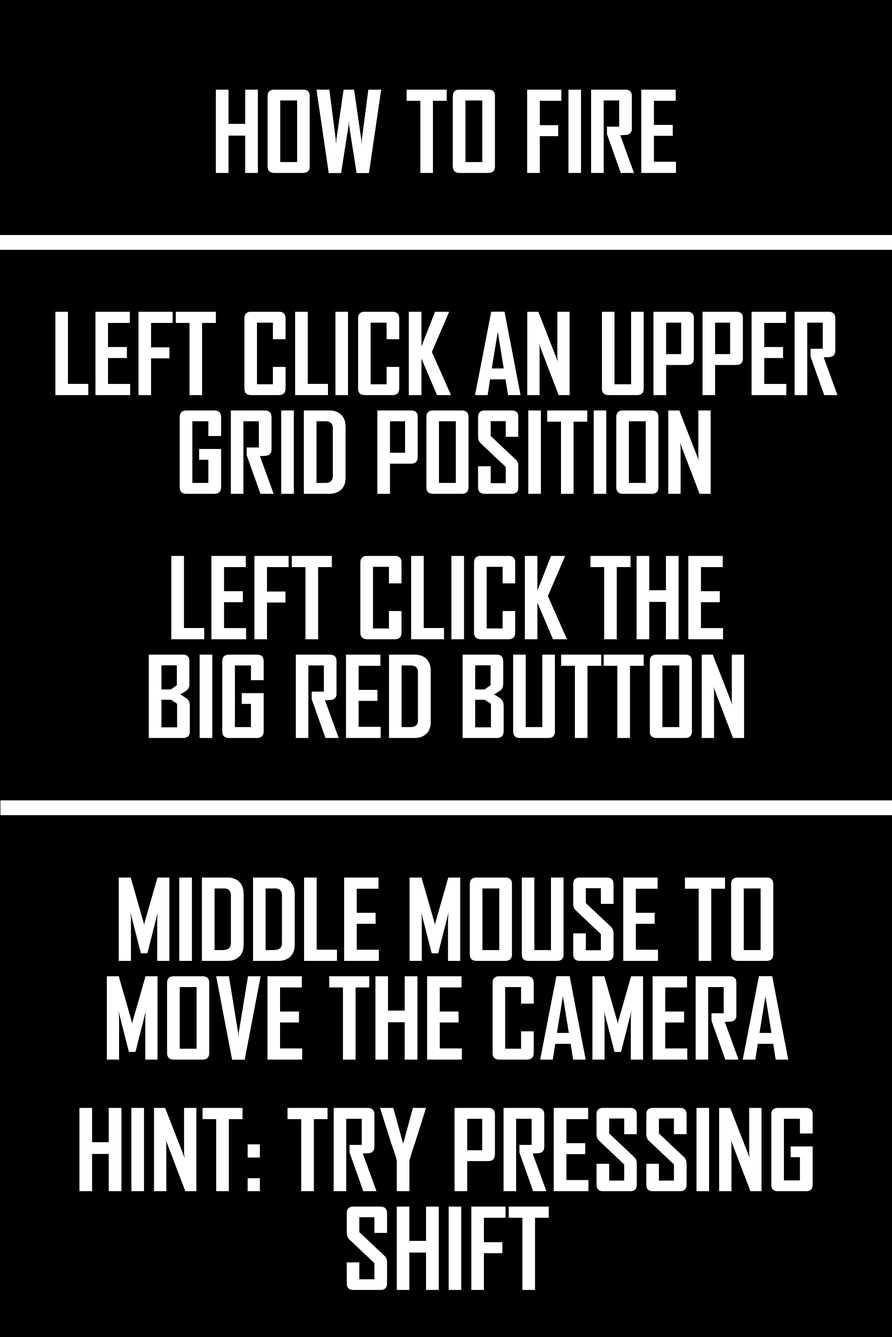
<style>
.page{position:relative;width:892px;height:1337px;background:#000000}
.page>*{position:absolute;margin:0}
.t1{font:108.8px "AgencyFB-Bold";color:#ffffff}
.t2{font:108.8px/32.9px "AgencyFB-Bold";color:#ffffff}
</style>
<div class="page">
<p class="t1" style="left:215px;top:90px;width:461px;height:83px">HOW TO FIRE</p>
<p class="t2" style="left:55px;top:312px;width:782px;height:182px;text-align:center">LEFT CLICK AN UPPER<br><br><br>GRID POSITION</p>
<p class="t2" style="left:148px;top:556px;width:596px;height:182px;text-align:center">LEFT CLICK THE<br><br><br>BIG RED BUTTON</p>
<p class="t2" style="left:79px;top:878px;width:733px;height:412px;text-align:center">MIDDLE MOUSE TO<br><br><br>MOVE THE CAMERA<br><br><br><br>HINT: TRY PRESSING<br><br><br>SHIFT</p>
</div>
